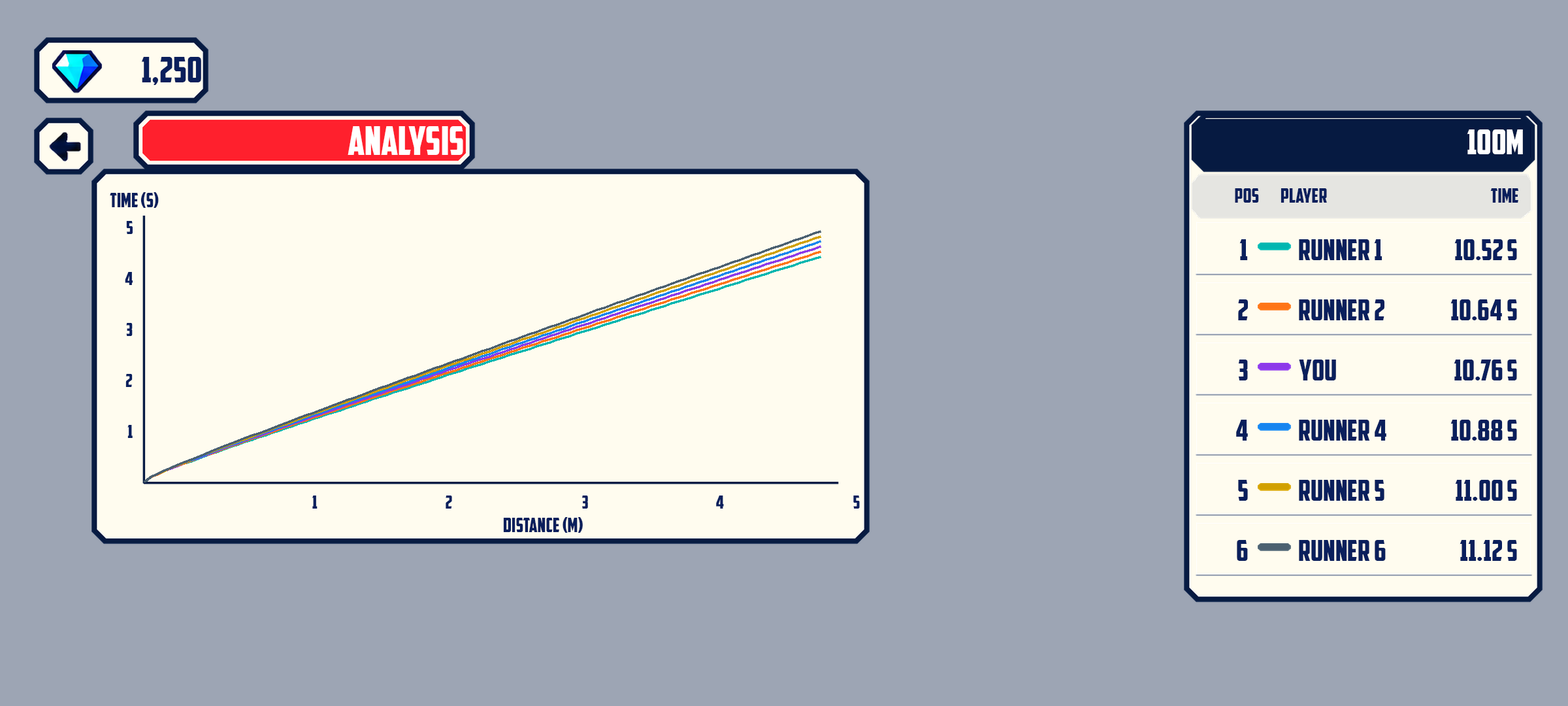
<style>
.page{position:relative;width:1568px;height:706px;background:#9da5b4}
.page>*{position:absolute;margin:0}
.t1{font:35.3px "AmericanCaptain";color:#0a1f5c}
.t2{font:39.2px "AmericanCaptain";color:#ffffff}
.t3{font:34px "AmericanCaptain";color:#ffffff}
.t4{font:19.6px "AmericanCaptain";color:#0a1f5c}
.t5{font:18.3px "AmericanCaptain";color:#0a1f5c}
.t6{font:28.7px "AmericanCaptain";color:#0a1f5c}
</style>
<div class="page">
<p class="t1" style="left:141px;top:57px;width:60px;height:28px">1,250</p>
<p class="t2" style="left:348px;top:126px;width:115px;height:29px">ANALYSIS</p>
<p class="t3" style="left:1467px;top:129px;width:56px;height:25px">100m</p>
<p class="t4" style="left:110px;top:192px;width:49px;height:16px">TIME (s)</p>
<p class="t4" style="left:1235px;top:188px;width:24px;height:15px">POS</p>
<p class="t4" style="left:1281px;top:188px;width:46px;height:15px">PLAYER</p>
<p class="t4" style="left:1490px;top:188px;width:29px;height:15px">TIME</p>
<p class="t5" style="left:126px;top:221px;width:7px;height:13px">5</p>
<p class="t6" style="left:1239px;top:239px;width:9px;height:21px">1</p>
<p class="t6" style="left:1299px;top:239px;width:83px;height:21px">Runner 1</p>
<p class="t6" style="left:1454px;top:239px;width:63px;height:21px">10.52 s</p>
<p class="t5" style="left:125px;top:272px;width:8px;height:13px">4</p>
<p class="t6" style="left:1238px;top:299px;width:10px;height:21px">2</p>
<p class="t6" style="left:1299px;top:299px;width:85px;height:21px">Runner 2</p>
<p class="t6" style="left:1450px;top:299px;width:67px;height:21px">10.64 s</p>
<p class="t5" style="left:126px;top:323px;width:7px;height:13px">3</p>
<p class="t6" style="left:1238px;top:359px;width:10px;height:21px">3</p>
<p class="t6" style="left:1299px;top:359px;width:37px;height:21px">YOU</p>
<p class="t6" style="left:1454px;top:359px;width:63px;height:21px">10.76 s</p>
<p class="t5" style="left:125px;top:374px;width:8px;height:13px">2</p>
<p class="t5" style="left:127px;top:425px;width:6px;height:13px">1</p>
<p class="t6" style="left:1236px;top:419px;width:12px;height:21px">4</p>
<p class="t6" style="left:1299px;top:419px;width:87px;height:21px">Runner 4</p>
<p class="t6" style="left:1450px;top:419px;width:67px;height:21px">10.88 s</p>
<p class="t6" style="left:1238px;top:480px;width:10px;height:20px">5</p>
<p class="t6" style="left:1299px;top:480px;width:85px;height:20px">Runner 5</p>
<p class="t6" style="left:1455px;top:480px;width:62px;height:20px">11.00 s</p>
<p class="t5" style="left:312px;top:495px;width:6px;height:13px">1</p>
<p class="t5" style="left:446px;top:495px;width:6px;height:13px">2</p>
<p class="t5" style="left:582px;top:495px;width:6px;height:13px">3</p>
<p class="t5" style="left:716px;top:495px;width:8px;height:13px">4</p>
<p class="t5" style="left:853px;top:495px;width:7px;height:13px">5</p>
<p class="t4" style="left:503px;top:517px;width:80px;height:15px">DISTANCE (m)</p>
<p class="t6" style="left:1237px;top:540px;width:11px;height:21px">6</p>
<p class="t6" style="left:1299px;top:540px;width:87px;height:21px">Runner 6</p>
<p class="t6" style="left:1460px;top:540px;width:57px;height:21px">11.12 s</p>
</div>
